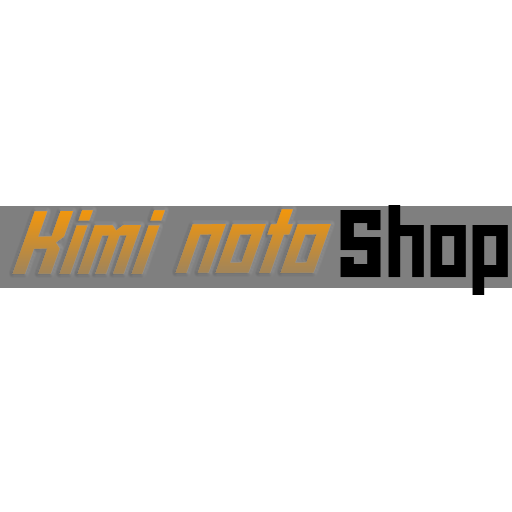
<style>
.page{position:relative;width:512px;height:512px;background:#ffffff}
.page>*{position:absolute;margin:0}
.t1{font:105.1px "DBSiamSquareX-ExtraBold";scale:0.95 1}
.t2{font:106.3px "DBSiamSquareX-ExtraBold";color:#000000}
</style>
<div class="page">
<p class="t1" style="left:12px;top:209px;width:319px;height:65px">Kimi noto</p>
<p class="t2" style="left:340px;top:205px;width:168px;height:90px">Shop</p>
</div>
